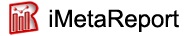
<style>
.page{position:relative;width:188px;height:36px;background:#ffffff}
.page>*{position:absolute;margin:0}
.t1{font:24px "ArialMT";color:#000000}
</style>
<div class="page">
<p class="t1" style="left:49px;top:9px;width:130px;height:23px">iMetaReport</p>
</div>
